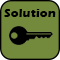
<style>
.page{position:relative;width:60px;height:60px;background:#738a3c}
.page>*{position:absolute;margin:0}
.t1{font:12.3px "ErasITC-Bold";color:#000000}
</style>
<div class="page">
<p class="t1" style="left:4px;top:9px;width:52px;height:8px">Solution</p>
</div>
